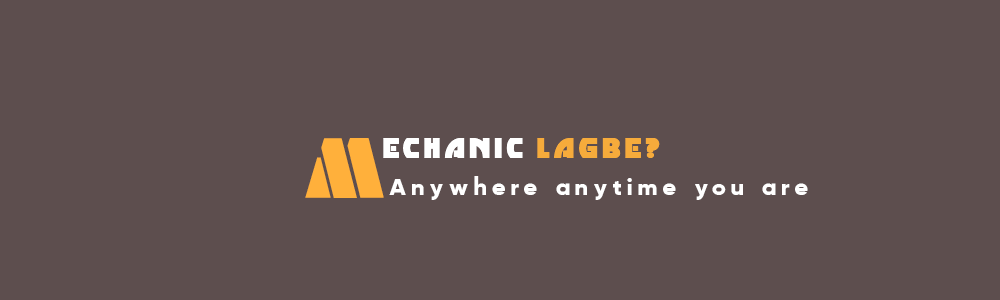
<style>
.page{position:relative;width:1000px;height:300px;background:#5d4e4e}
.page>*{position:absolute;margin:0}
.t1{font:90.5px "Viking-Stencil";letter-spacing:0.2em;color:#ffb03b}
.t2{font:24px "MinstrelPosterNF";letter-spacing:0.2em;color:#ffffff}
.t3{font:24px "MinstrelPosterNF";letter-spacing:0.2em;color:#f6ab3b}
.t4{font:24px "Maximize-Bold";letter-spacing:0.2em;color:#ffffff}
</style>
<div class="page">
<p class="t1" style="left:305px;top:138px;width:79px;height:60px">M</p>
<p class="t2" style="left:383px;top:138px;width:277px;height:20px">ECHANIC <span class="t3">LAGBE?</span></p>
<p class="t4" style="left:389px;top:176px;width:419px;height:24px">Anywhere anytime you are</p>
</div>
